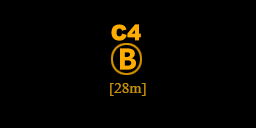
<style>
.page{position:relative;width:256px;height:128px;background:#000000}
.page>*{position:absolute;margin:0}
.t1{font:21px "Arial-Black";color:#ffae00}
.t2{font:32px "SourceSansPro-Bold";color:#ffae00}
</style>
<div class="page">
<p class="t1" style="left:111px;top:24px;width:30px;height:17px">C4</p>
<p class="t2" style="left:120px;top:48px;width:16px;height:22px">B</p>
</div>
